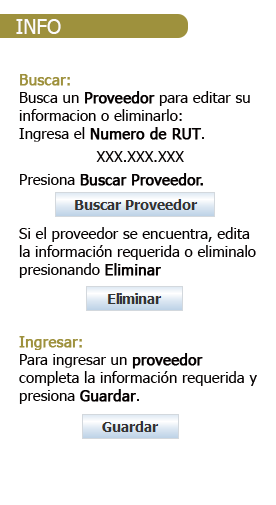
<style>
.page{position:relative;width:276px;height:505px;background:#ffffff}
.page>*{position:absolute;margin:0}
.t1{font:20px "Tahoma";color:#fcfbfb}
.t2{font:15px "Tahoma";color:#040000}
.t3{font:15px "Tahoma";color:#9e913d;font-weight:bold}
.t4{font:15px "Tahoma";color:#040000;font-weight:bold}
</style>
<div class="page">
<p class="t1" style="left:16px;top:19px;width:45px;height:15px">INFO</p>
<p class="t2" style="left:19px;top:74px;width:238px;height:330px"><span class="t3">Buscar:<br></span>Busca un <span class="t4">Proveedor</span> para editar su informacion o eliminarlo:<br>Ingresa el <span class="t4">Numero de RUT</span>.<br>XXX.XXX.XXX<br>Presiona <span class="t4">Buscar Proveedor.<br></span><br><br>Si el proveedor se encuentra, edita la información requerida o eliminalo presionando <span class="t4">Eliminar<br><br><br><br></span><span class="t3">Ingresar:<br></span>Para ingresar un <span class="t4">proveedor</span> completa la información requerida y presiona <span class="t4">Guardar</span>.</p>
</div>
